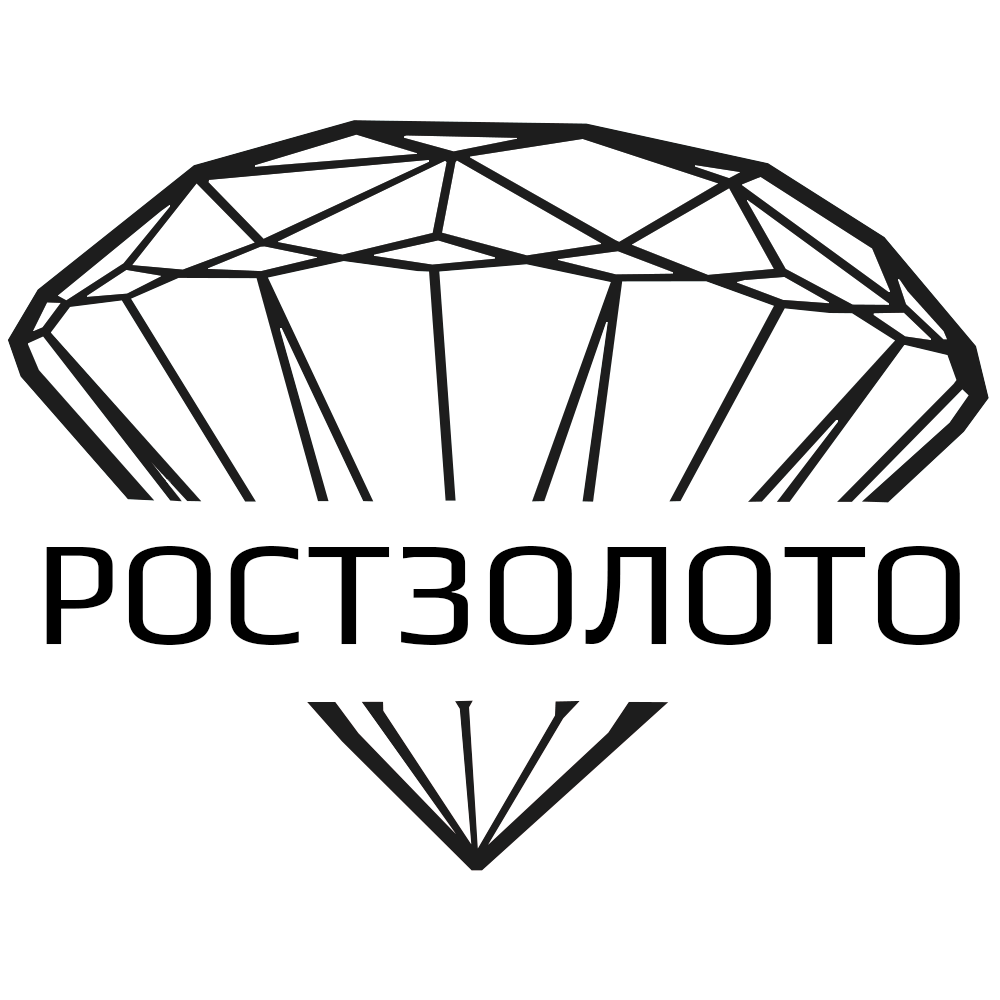
<style>
.page{position:relative;width:1000px;height:1000px;background:#ffffff}
.page>*{position:absolute;margin:0}
.t1{font:149.8px "Play-Regular";color:#000000}
</style>
<div class="page">
<p class="t1" style="left:46px;top:546px;width:914px;height:99px">РОСТЗОЛОТО</p>
</div>
